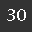
<style>
.page{position:relative;width:32px;height:32px;background:#333333}
.page>*{position:absolute;margin:0}
.t1{font:17.8px "MyriadPro-Regular";color:#ffffff;scale:1.12 1}
</style>
<div class="page">
<p class="t1" style="left:7px;top:9px;width:19px;height:12px">30</p>
</div>
